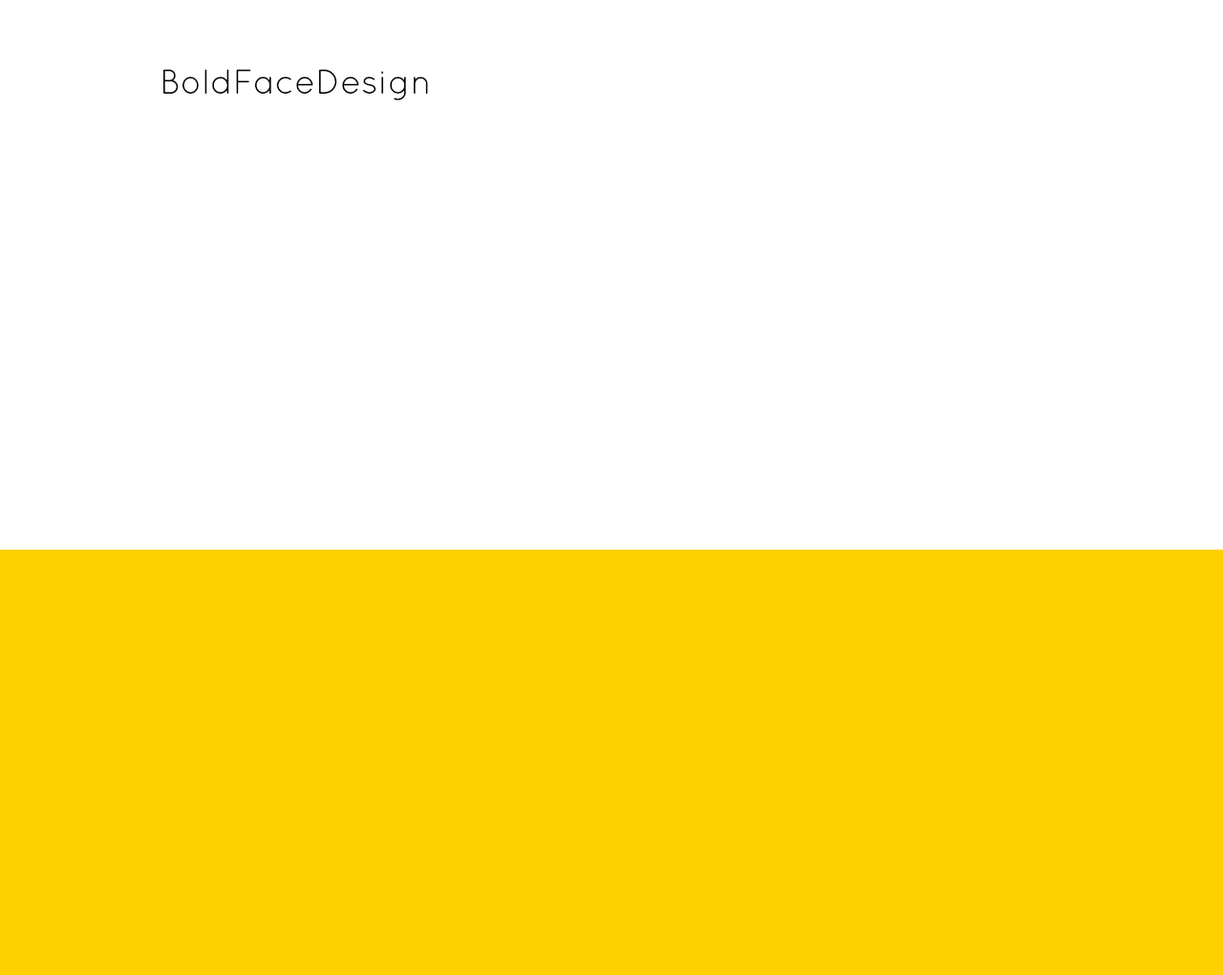
<style>
.page{position:relative;width:1223px;height:975px;background:#ffffff}
.page>*{position:absolute;margin:0}
.t1{font:34.4px "Quicksand-Regular";color:#000000}
</style>
<div class="page">
<p class="t1" style="left:163px;top:69px;width:265px;height:31px">BoldFaceDesign</p>
</div>
